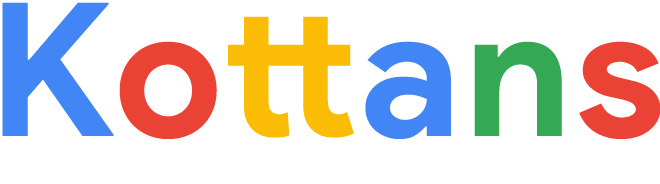
<style>
.page{position:relative;width:660px;height:184px;background:#ffffff}
.page>*{position:absolute;margin:0}
.t1{font:186px "ProductSans-Bold";letter-spacing:0.025em;color:#fbbc05}
.t2{font:186px "ProductSans-Bold";letter-spacing:0.025em;color:#4285f4}
.t3{font:186px "ProductSans-Bold";letter-spacing:0.025em;color:#ea4335}
.t4{font:186px "ProductSans-Bold";letter-spacing:0.025em;color:#34a853}
</style>
<div class="page">
<p class="t1" style="left:2px;top:2px;width:659px;height:137px"><span class="t2">K</span><span class="t3">o</span>tt<span class="t2">a</span><span class="t4">n</span><span class="t3">s</span></p>
</div>
